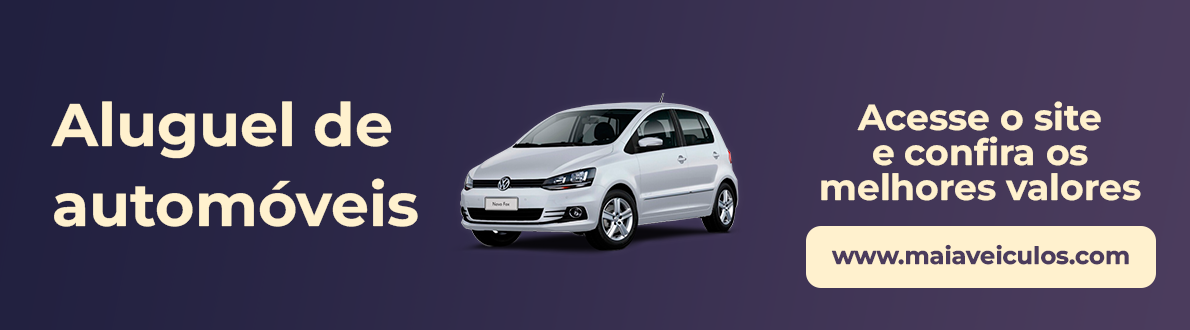
<style>
.page{position:relative;width:1190px;height:330px}
.page>*{position:absolute;margin:0}
.t1{font:60px/80px "MontserratRoman-Bold";color:#fff1ce}
.t2{font:36px/35px "MontserratRoman-Bold";color:#fff1ce}
.t3{font:24px "MontserratRoman-Bold";color:#4b3c5d}
</style>
<div class="page">
<p class="t1" style="left:51px;top:101px;width:367px;height:126px">Aluguel de <br>automóveis</p>
<p class="t2" style="left:821px;top:101px;width:320px;height:100px;text-align:center">Acesse o site <br>e confira os <br>melhores valores</p>
<p class="t3" style="left:831px;top:244px;width:298px;height:21px">www.maiaveiculos.com</p>
</div>
